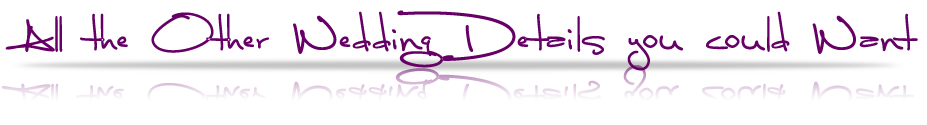
<style>
.page{position:relative;width:927px;height:125px;background:#ffffff}
.page>*{position:absolute;margin:0}
.t1{font:40px "LunaBar";color:#660066;font-weight:bold}
.t2{font:40px "LunaBar";color:#f3ebf3;font-weight:bold}
</style>
<div class="page">
<p class="t1" style="left:5px;top:10px;width:913px;height:61px">All the Other Wedding Details you could Want</p>
<p class="t2" style="left:1px;top:65px;width:913px;height:60px">All the Other Wedding Details you could Want</p>
</div>
